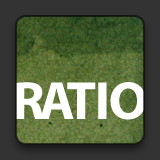
<style>
.page{position:relative;width:160px;height:160px;background:#333333}
.page>*{position:absolute;margin:0}
.t1{font:54px "Myriad-Bold";color:#ffffff}
</style>
<div class="page">
<p class="t1" style="left:16px;top:82px;width:130px;height:38px">RATIO</p>
</div>
